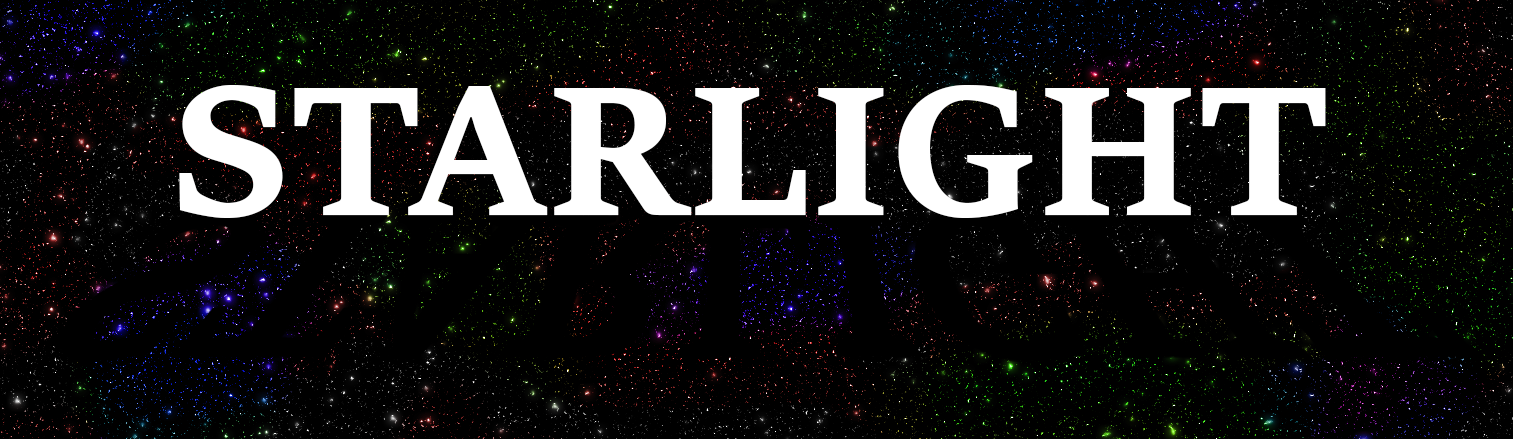
<style>
.page{position:relative;width:1513px;height:439px;background:#000000}
.page>*{position:absolute;margin:0}
.t1{font:200px "SitkaText-Bold";color:#ffffff;text-transform:uppercase}
</style>
<div class="page">
<p class="t1" style="left:179px;top:85px;width:1147px;height:133px">STARLIGHT</p>
</div>
